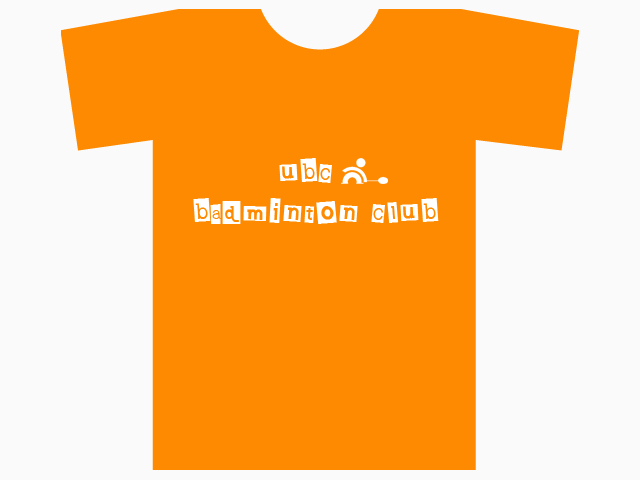
<style>
.page{position:relative;width:640px;height:480px;background:#fe8a01}
.page>*{position:absolute;margin:0}
.t1{font:33px "EarwigFactory";color:#ffffff}
</style>
<div class="page">
<p class="t1" style="left:193px;top:158px;width:246px;height:66px">ubc<br>badminton club</p>
</div>
